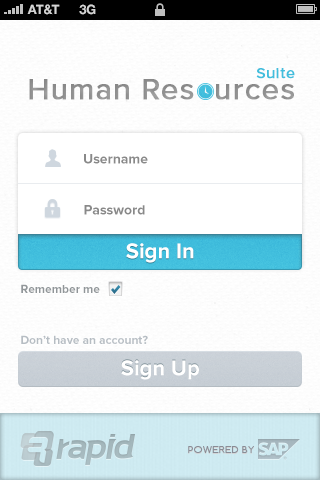
<style>
.page{position:relative;width:320px;height:480px;background:#ffffff}
.page>*{position:absolute;margin:0}
.t1{font:13px "HelveticaNeue-Bold";color:#d4d4d4;text-transform:uppercase}
.t2{font:15px "ProximaNova-Regular";letter-spacing:0.036em;color:#41bedd;font-weight:bold}
.t3{font:30px "ProximaNova-Regular";letter-spacing:0.023em;color:#919191;font-weight:bold}
.t4{font:14px "ProximaNova-Bold";color:#898989}
.t5{font:22px "ProximaNova-Bold";color:#ffffff}
.t6{font:12px "ProximaNova-Bold";color:#919699}
.t7{font:12px "ProximaNova-Bold";color:#b6bdc3}
.t8{font:9px "Comfortaa";letter-spacing:0.036em;color:#898c96;text-transform:uppercase;scale:1.11 1}
</style>
<div class="page">
<p class="t1" style="left:27px;top:4px;width:33px;height:11px">AT&amp;t</p>
<p class="t1" style="left:79px;top:4px;width:17px;height:11px">3G</p>
<p class="t2" style="left:256px;top:68px;width:39px;height:11px">Suite</p>
<p class="t3" style="left:29px;top:79px;width:265px;height:21px">Human Res  urces</p>
<p class="t4" style="left:84px;top:154px;width:64px;height:10px">Username</p>
<p class="t4" style="left:84px;top:205px;width:61px;height:10px">Password</p>
<p class="t5" style="left:126px;top:243px;width:68px;height:20px">Sign In</p>
<p class="t5" style="left:126px;top:243px;width:68px;height:20px">Sign In</p>
<p class="t6" style="left:21px;top:284px;width:79px;height:9px">Remember me</p>
<p class="t7" style="left:21px;top:335px;width:127px;height:9px">Don’t have an account?</p>
<p class="t5" style="left:121px;top:360px;width:78px;height:20px">Sign Up</p>
<p class="t8" style="left:188px;top:446px;width:66px;height:7px">POWERED BY</p>
</div>
